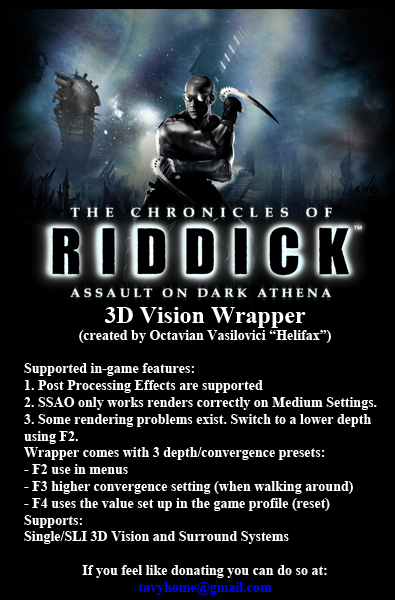
<style>
.page{position:relative;width:395px;height:600px;background:#000000}
.page>*{position:absolute;margin:0}
.t1{font:14px "TimesNewRomanPS-BoldMT";color:#ffffff}
.t2{font:24px "TimesNewRomanPS-BoldMT";color:#ffffff}
.t3{font:14px "TimesNewRomanPS-BoldMT";color:#0000ff}
</style>
<div class="page">
<p class="t1" style="left:24px;top:307px;width:353px;height:288px;text-align:center"><span class="t2">3D Vision Wrapper<br></span>(created by Octavian Vasilovici “Helifax”)<br><br>Supported in-game features:<br>1. Post Processing Effects are supported<br>2. SSAO only works renders correctly on Medium Settings.<br>3. Some rendering problems exist. Switch to a lower depth using F2.<br>Wrapper comes with 3 depth/convergence presets:<br>- F2 use in menus<br>- F3 higher convergence setting (when walking around)<br>- F4 uses the value set up in the game profile (reset)<br>Supports:<br>Single/SLI 3D Vision and Surround Systems<br><br>If you feel like donating you can do so at:<br><span class="t3">tavyhome@gmail.com</span></p>
</div>
